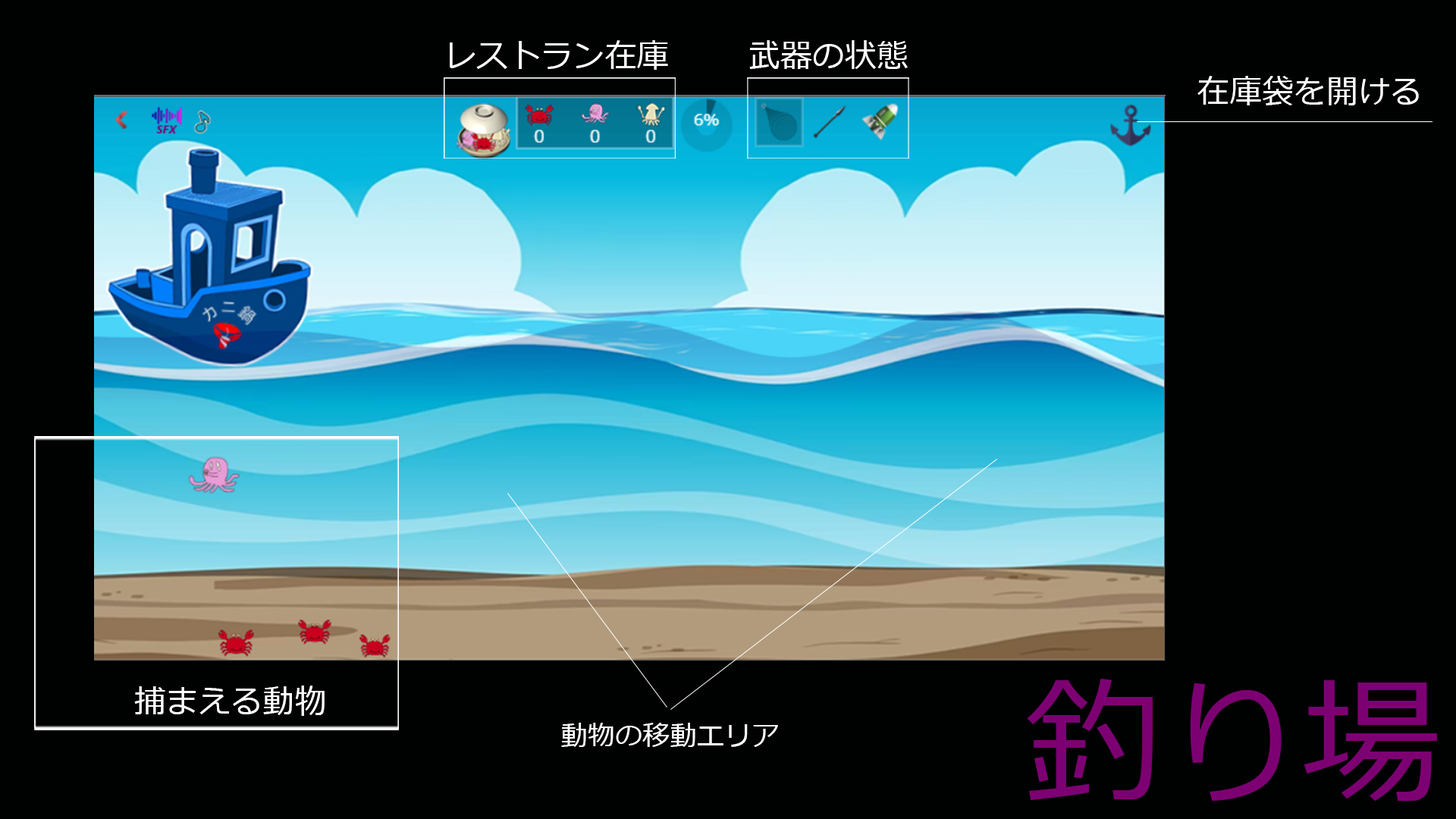
<style>
.page{position:relative;width:1456px;height:819px;background:#000101}
.page>*{position:absolute;margin:0}
.t1{font:32.9px "Meiryo";color:#ffffff}
.t2{font:137.1px "Meiryo";color:#7d0073}
.t3{font:27.3px "Meiryo";color:#ffffff}
</style>
<div class="page">
<p class="t1" style="left:450px;top:40px;width:218px;height:30px">レストラン在庫</p>
<p class="t1" style="left:749px;top:40px;width:159px;height:29px">武器の状態</p>
<p class="t1" style="left:1197px;top:76px;width:222px;height:29px">在庫袋を開ける</p>
<p class="t1" style="left:134px;top:686px;width:191px;height:30px">捕まえる動物</p>
<p class="t2" style="left:1027px;top:679px;width:410px;height:122px">釣り場</p>
<p class="t3" style="left:561px;top:723px;width:217px;height:24px">動物の移動エリア</p>
</div>
